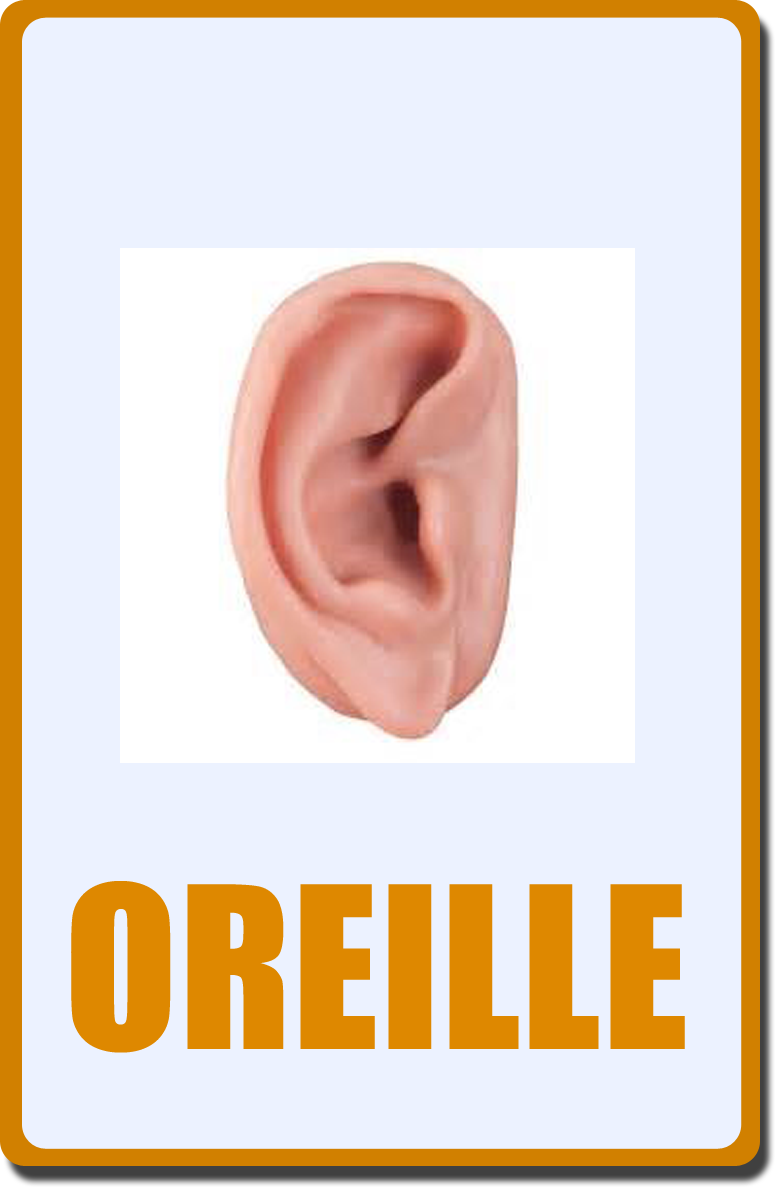
<style>
.page{position:relative;width:775px;height:1187px;background:#ecf2ff}
.page>*{position:absolute;margin:0}
.t1{font:208.3px "Impact";letter-spacing:0.005em;color:#de8800}
</style>
<div class="page">
<p class="t1" style="left:71px;top:881px;width:614px;height:172px">OREILLE</p>
</div>
